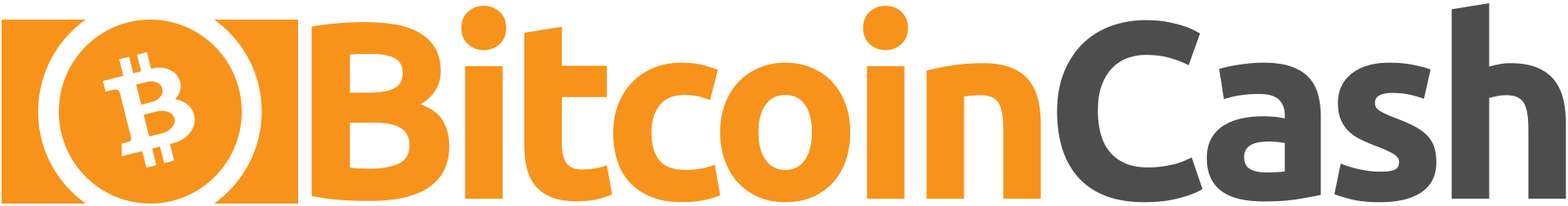
<style>
.page{position:relative;width:1568px;height:206px;background:#ffffff}
.page>*{position:absolute;margin:0}
.t1{font:251.5px "Ubuntu-Bold";letter-spacing:-0.05em;color:#f7931a}
.t2{font:251.5px "Ubuntu-Bold";letter-spacing:-0.05em;color:#4d4d4d}
</style>
<div class="page">
<p class="t1" style="left:311px;top:2px;width:1255px;height:201px">Bitcoin<span class="t2">Cash</span></p>
</div>
